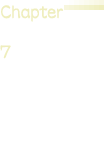
<style>
.page{position:relative;width:104px;height:160px;background:#ffffff}
.page>*{position:absolute;margin:0}
.t1{font:24.2px "DFLeiShoStd-W5";letter-spacing:-0.025em;color:#efeebe;scale:0.8 1}
.t2{font:24.2px "DFLeiShoStd-W5";letter-spacing:-0.025em;color:#efeebe;scale:0.83 1}
</style>
<div class="page">
<p class="t1" style="left:1px;top:5px;width:62px;height:17px">Chapter</p>
<p class="t2" style="left:0px;top:45px;width:11px;height:14px">7</p>
</div>
